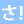
<style>
.page{position:relative;width:24px;height:24px;background:#91c3ff}
.page>*{position:absolute;margin:0}
.t1{font:17px "KozGoPr6N-Regular";color:#ffffff;font-weight:bold}
</style>
<div class="page">
<p class="t1" style="left:2px;top:5px;width:21px;height:16px">さ！</p>
</div>
